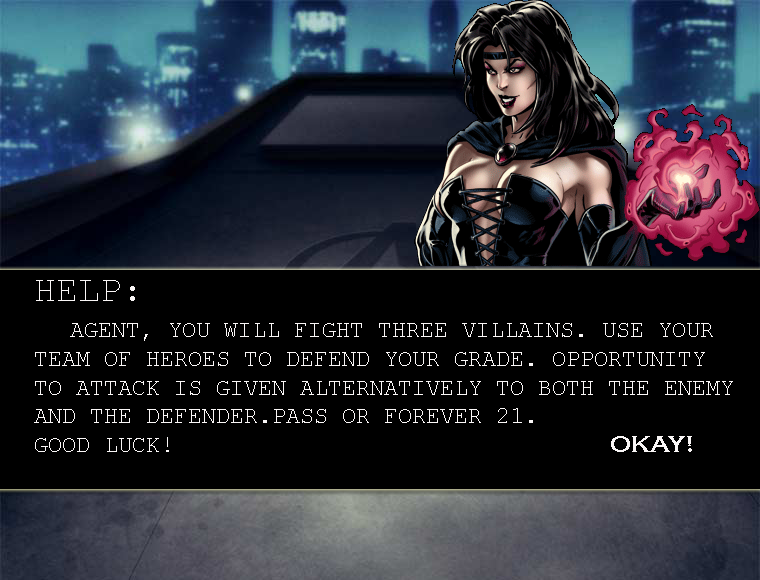
<style>
.page{position:relative;width:760px;height:580px;background:#000000}
.page>*{position:absolute;margin:0}
.t1{font:24px "CourierNewPSMT";color:#faf7f7}
.t2{font:36px "CourierNewPSMT";color:#faf7f7}
.t3{font:24px "CopperplateGothic-Bold";color:#faf7f7}
</style>
<div class="page">
<p class="t1" style="left:34px;top:280px;width:699px;height:172px"><span class="t2">HELP:<br> </span>AGENT, YOU WILL FIGHT THREE VILLAINS. USE YOUR<br>TEAM OF HEROES TO DEFEND YOUR GRADE. OPPORTUNITY<br>TO ATTACK IS GIVEN ALTERNATIVELY TO BOTH THE ENEMY<br>AND THE DEFENDER.PASS OR FOREVER 21.<br>GOOD LUCK!             <span class="t3">OKAY!</span></p>
</div>
